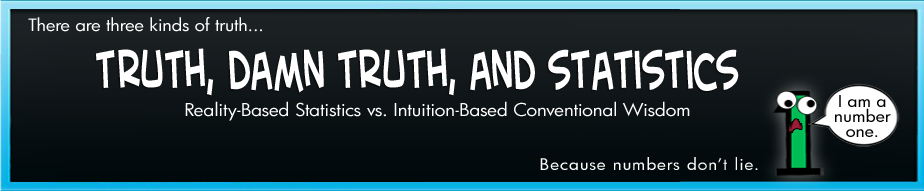
<style>
.page{position:relative;width:924px;height:191px}
.page>*{position:absolute;margin:0}
.t1{font:16.7px "FuturaBk";letter-spacing:-0.01em;color:#ffffff;scale:1.1 1}
.t2{font:62.4px "CreativeBlockBB";letter-spacing:-0.01em;color:#ffffff;scale:0.64 1}
.t3{font:17.2px "FuturaBk";letter-spacing:-0.01em;color:#ffffff;scale:1.1 1}
.t4{font:16px/15px "FuturaBk";color:#000000;scale:1.1 1}
.t5{font:15.6px "FuturaBk";letter-spacing:0.05em;color:#ffffff;scale:1.1 1}
</style>
<div class="page">
<p class="t1" style="left:28px;top:17px;width:234px;height:15px">There are three kinds of truth...</p>
<p class="t2" style="left:96px;top:48px;width:643px;height:48px">truth, damn truth, and statistics</p>
<p class="t3" style="left:185px;top:101px;width:505px;height:20px">Reality-Based Statistics vs. Intuition-Based Conventional Wisdom</p>
<p class="t4" style="left:835px;top:95px;width:56px;height:42px;text-align:center">I am a <br>number <br>one.</p>
<p class="t5" style="left:540px;top:157px;width:218px;height:13px">Because numbers don’t lie.</p>
</div>
